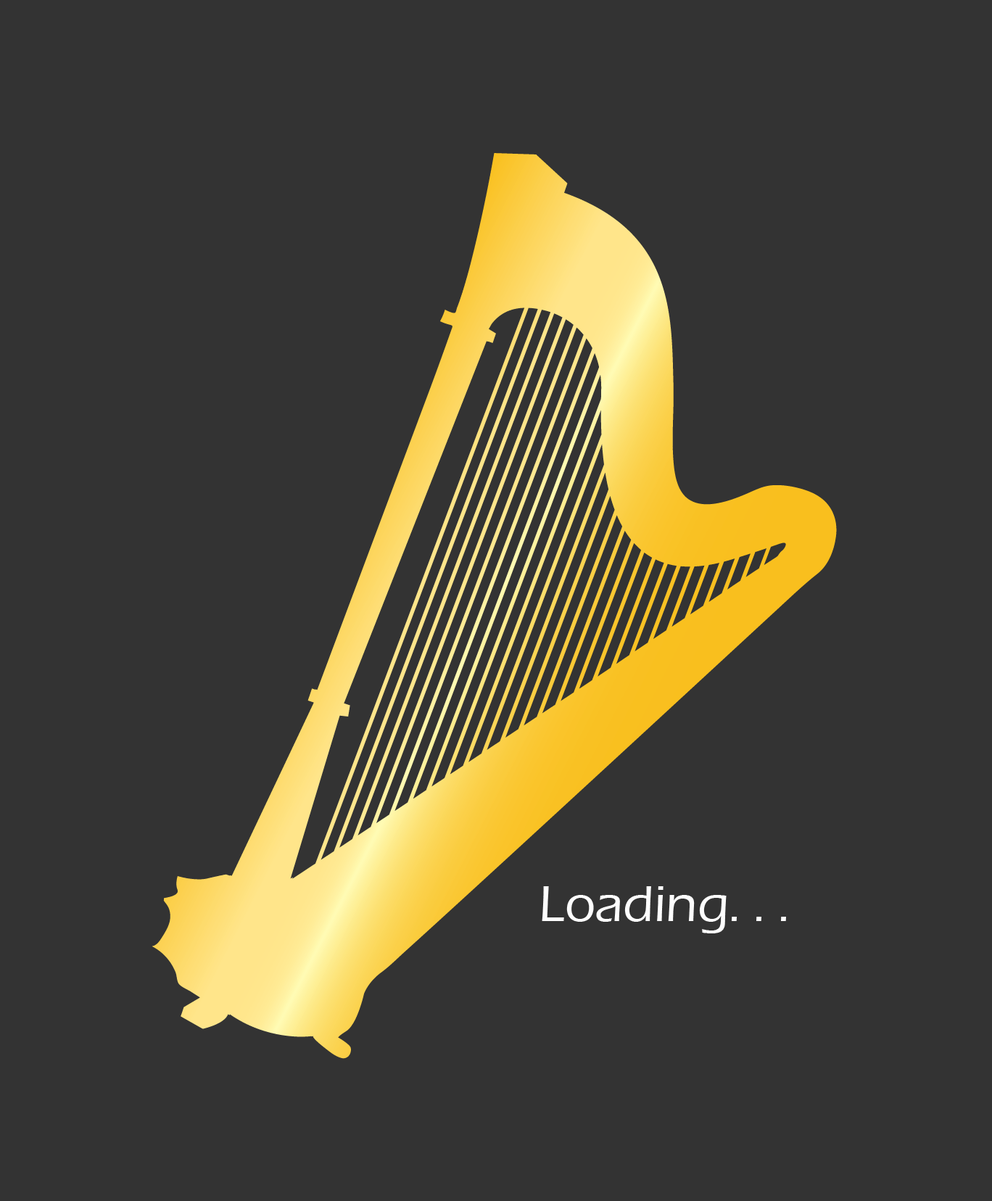
<style>
.page{position:relative;width:992px;height:1201px;background:#333333}
.page>*{position:absolute;margin:0}
.t1{font:52.2px "ErasITC-Medium";color:#fefefe}
</style>
<div class="page">
<p class="t1" style="left:542px;top:887px;width:244px;height:47px">Loading. . .</p>
</div>
